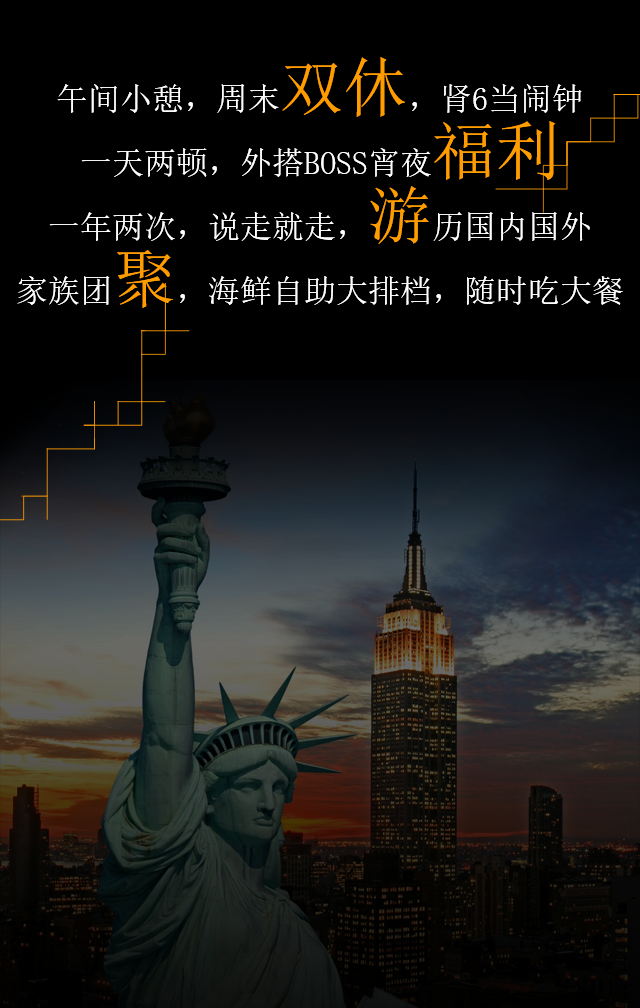
<style>
.page{position:relative;width:640px;height:1008px;background:#000000}
.page>*{position:absolute;margin:0}
.t1{font:32px/64px "SimSun";color:#fefefe}
.t2{font:64px/64px "SimSun";color:#ff9c00}
.t3{font:32px/80px "SimSun";color:#fefefe}
.t4{font:64px/80px "SimSun";color:#ff9c00}
</style>
<div class="page">
<p class="t1" style="left:17px;top:57px;width:606px;height:251px;text-align:center">午间小憩，周末<span class="t2">双休</span>，肾6当闹钟<br>一天两顿，外搭BOSS宵夜<span class="t2">福利<br></span>一年两次，说走就走，<span class="t2">游</span>历国内国外<br><span class="t3">家族团</span><span class="t4">聚</span><span class="t3">，海鲜自助大排档，随时吃大餐</span></p>
</div>
